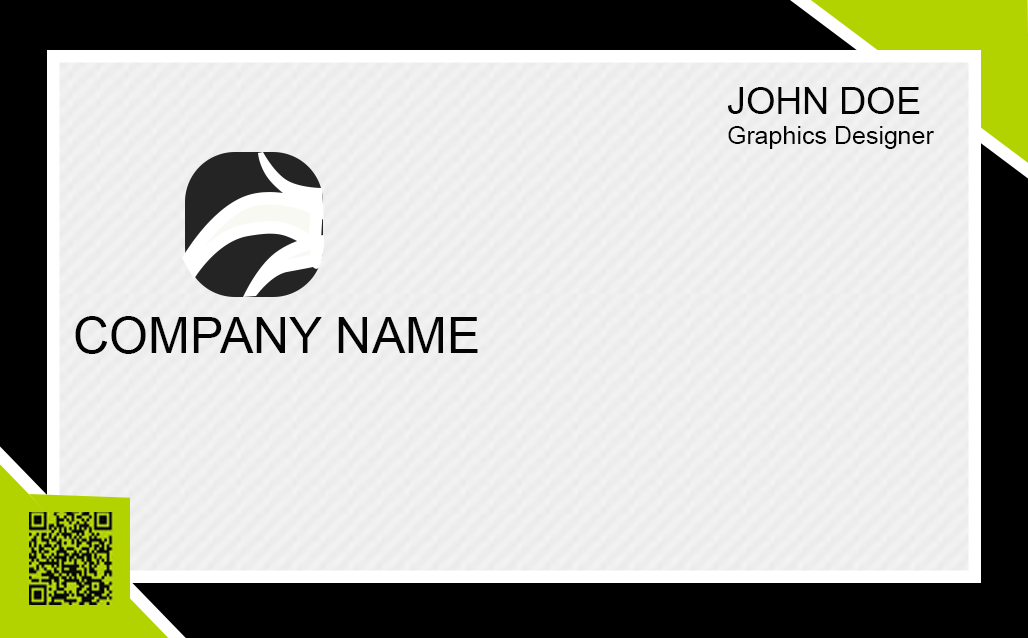
<style>
.page{position:relative;width:1028px;height:638px;background:#000000}
.page>*{position:absolute;margin:0}
.t1{font:25px "ArialMT";color:#030303}
.t2{font:37.5px "ArialMT";color:#030303}
.t3{font:12px "ArialMT";color:#030303}
</style>
<div class="page">
<p class="t1" style="left:728px;top:87px;width:206px;height:62px"><span class="t2">JOHN DOE<br></span>Graphics Designer</p>
<p class="t3" style="left:75px;top:316px;width:403px;height:38px">COMPANY NAME</p>
</div>
